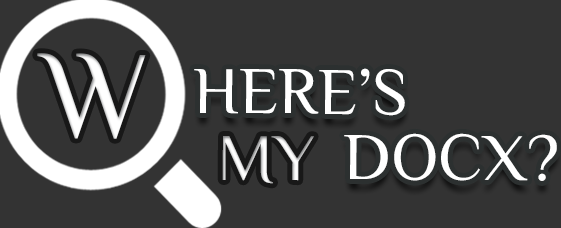
<style>
.page{position:relative;width:561px;height:228px;background:#333333}
.page>*{position:absolute;margin:0}
.t1{font:124.9px "Philosopher";color:#ffffff;text-transform:uppercase}
.t2{font:66.6px "Philosopher";color:#ffffff;text-transform:uppercase}
.t3{font:66.6px "Philosopher";text-transform:uppercase}
</style>
<div class="page">
<p class="t1" style="left:37px;top:53px;width:109px;height:86px">w</p>
<p class="t2" style="left:194px;top:68px;width:211px;height:48px">here’s</p>
<p class="t3" style="left:222px;top:136px;width:92px;height:48px">my</p>
<p class="t2" style="left:344px;top:133px;width:213px;height:48px">DoCX?</p>
</div>
